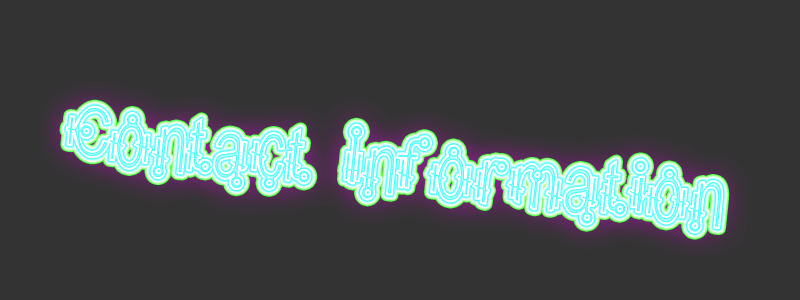
<style>
.page{position:relative;width:800px;height:300px;background:#333333}
.page>*{position:absolute;margin:0}
.t1{font:72px "ShamanticsHollow";color:#ffffff}
</style>
<div class="page">
<p class="t1" style="left:65px;top:105px;width:659px;height:129px;rotate:6deg">Contact Information</p>
</div>
